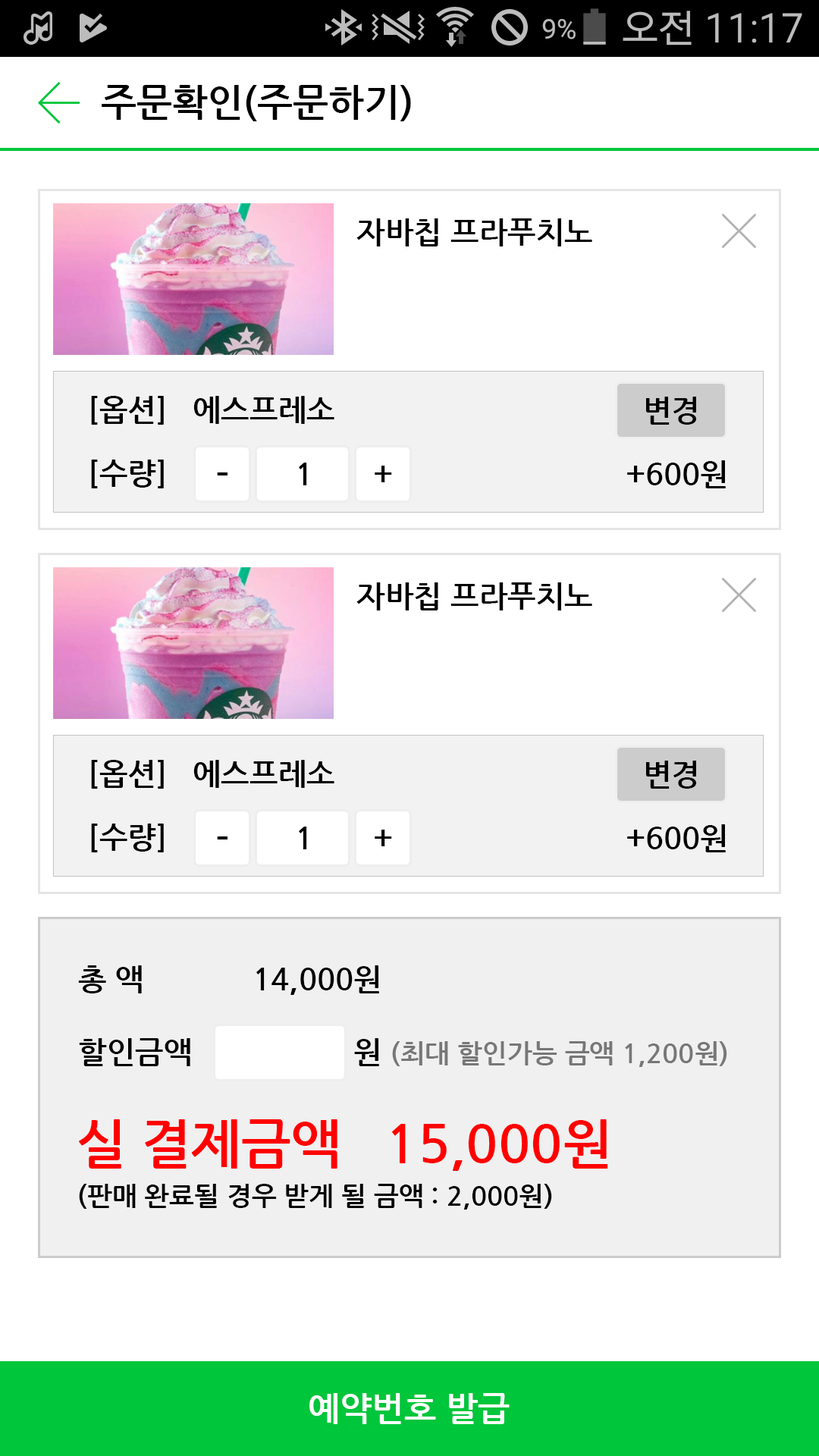
<style>
.page{position:relative;width:819px;height:1456px;background:#ffffff}
.page>*{position:absolute;margin:0}
.t1{font:37.9px "NanumGothicBold";color:#000000}
.t2{font:30.3px "NanumGothicBold";color:#000000}
.t3{font:26.5px "NanumGothicBold";color:#777777}
.t4{font:53.1px "NanumGothicBold";color:#ff0000}
.t5{font:26.5px "NanumGothicBold";color:#000000}
.t6{font:34.1px "NanumGothicBold";color:#ffffff}
</style>
<div class="page">
<p class="t1" style="left:102px;top:85px;width:309px;height:36px">주문확인(주문하기)</p>
<p class="t2" style="left:356px;top:218px;width:236px;height:28px">자바칩 프라푸치노</p>
<p class="t2" style="left:91px;top:396px;width:243px;height:92px">[옵션]   에스프레소<br><br>[수량]</p>
<p class="t2" style="left:646px;top:397px;width:51px;height:28px">변경</p>
<p class="t2" style="left:627px;top:460px;width:99px;height:28px">+600원</p>
<p class="t1" style="left:217px;top:472px;width:10px;height:3px">-</p>
<p class="t2" style="left:299px;top:463px;width:8px;height:22px">1</p>
<p class="t2" style="left:375px;top:466px;width:17px;height:16px">+</p>
<p class="t2" style="left:356px;top:582px;width:236px;height:28px">자바칩 프라푸치노</p>
<p class="t2" style="left:91px;top:760px;width:243px;height:92px">[옵션]   에스프레소<br><br>[수량]</p>
<p class="t2" style="left:646px;top:761px;width:51px;height:28px">변경</p>
<p class="t2" style="left:299px;top:827px;width:8px;height:22px">1</p>
<p class="t2" style="left:375px;top:830px;width:17px;height:16px">+</p>
<p class="t2" style="left:627px;top:824px;width:99px;height:28px">+600원</p>
<p class="t1" style="left:217px;top:836px;width:10px;height:3px">-</p>
<p class="t2" style="left:78px;top:965px;width:112px;height:101px">총 액<br><br>할인금액</p>
<p class="t2" style="left:256px;top:965px;width:123px;height:30px">14,000원</p>
<p class="t3" style="left:354px;top:1038px;width:373px;height:29px"><span class="t2">원 </span>(최대 할인가능 금액 1,200원)</p>
<p class="t4" style="left:79px;top:1119px;width:529px;height:52px">실 결제금액   15,000원</p>
<p class="t5" style="left:79px;top:1184px;width:473px;height:26px">(판매 완료될 경우 받게 될 금액 : 2,000원)</p>
<p class="t6" style="left:309px;top:1393px;width:201px;height:31px">예약번호 발급</p>
</div>
